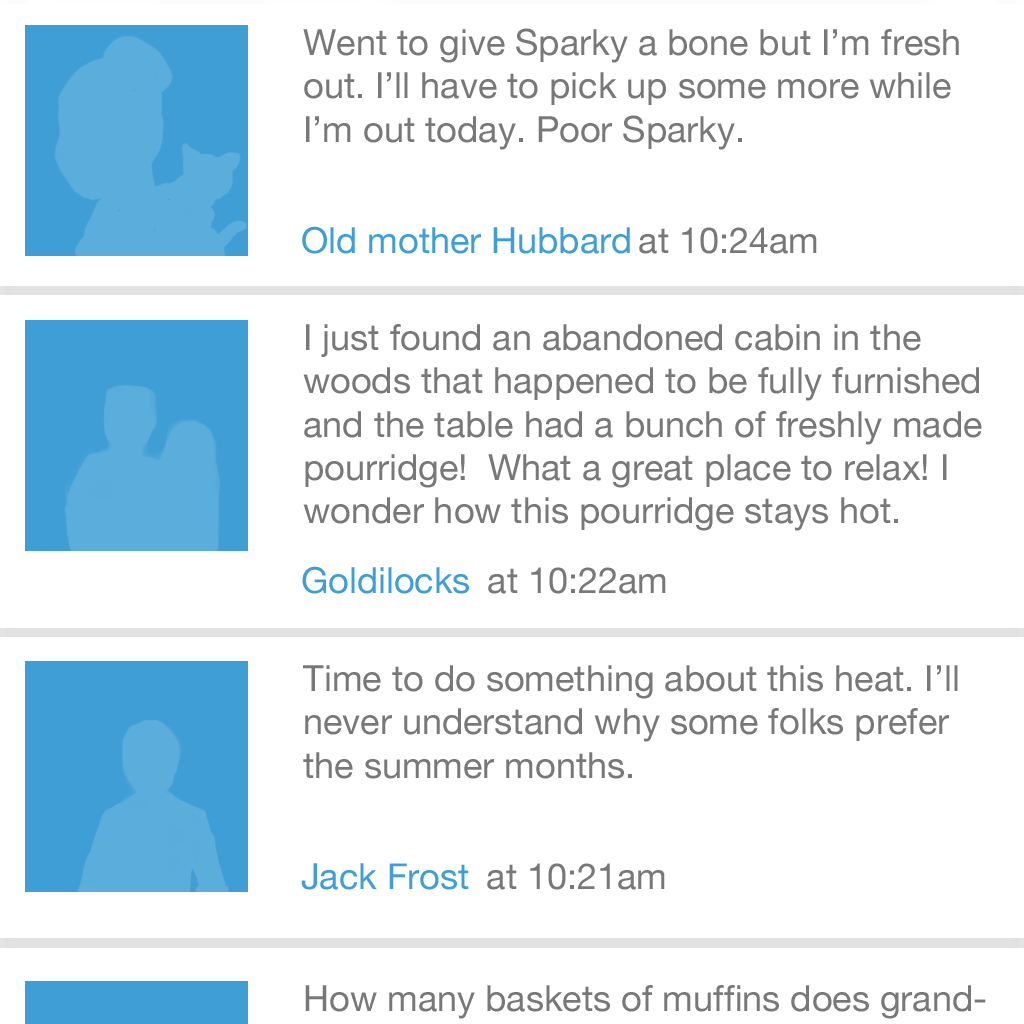
<style>
.page{position:relative;width:1024px;height:1024px;background:#ffffff}
.page>*{position:absolute;margin:0}
.t1{font:36px "HelveticaNeue";color:#787878}
.t2{font:35.9px "HelveticaNeue";color:#3e9ed5}
.t3{font:35.9px "HelveticaNeue";color:#787878}
</style>
<div class="page">
<p class="t1" style="left:303px;top:28px;width:656px;height:122px">Went to give Sparky a bone but I’m fresh out. I’ll have to pick up some more while I’m out today. Poor Sparky.</p>
<p class="t2" style="left:302px;top:226px;width:328px;height:28px">Old mother Hubbard</p>
<p class="t3" style="left:639px;top:227px;width:178px;height:27px">at 10:24am</p>
<p class="t1" style="left:303px;top:324px;width:679px;height:207px">I just found an abandoned cabin in the woods that happened to be fully furnished and the table had a bunch of freshly made pourridge!  What a great place to relax! I wonder how this pourridge stays hot.</p>
<p class="t2" style="left:302px;top:566px;width:167px;height:28px">Goldilocks</p>
<p class="t3" style="left:488px;top:567px;width:178px;height:27px">at 10:22am</p>
<p class="t1" style="left:303px;top:665px;width:655px;height:114px">Time to do something about this heat. I’ll never understand why some folks prefer the summer months.</p>
<p class="t2" style="left:301px;top:863px;width:168px;height:27px">Jack Frost</p>
<p class="t3" style="left:487px;top:863px;width:178px;height:27px">at 10:21am</p>
</div>
